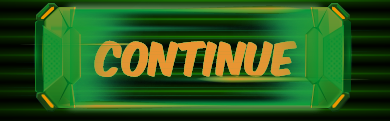
<style>
.page{position:relative;width:390px;height:121px}
.page>*{position:absolute;margin:0}
.t1{font:40px "KomikaAxis";color:#e79532}
</style>
<div class="page">
<p class="t1" style="left:94px;top:40px;width:203px;height:37px">Continue</p>
<p class="t1" style="left:94px;top:40px;width:203px;height:37px">Continue</p>
<p class="t1" style="left:94px;top:40px;width:203px;height:37px">Continue</p>
</div>
